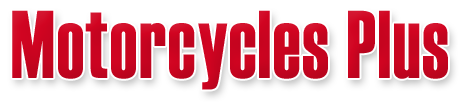
<style>
.page{position:relative;width:461px;height:105px;background:#ffffff}
.page>*{position:absolute;margin:0}
.t1{font:95.9px "Haettenschweiler";letter-spacing:0.025em;color:#d10421;scale:0.8 1}
</style>
<div class="page">
<p class="t1" style="left:12px;top:10px;width:436px;height:80px">Motorcycles Plus</p>
</div>
